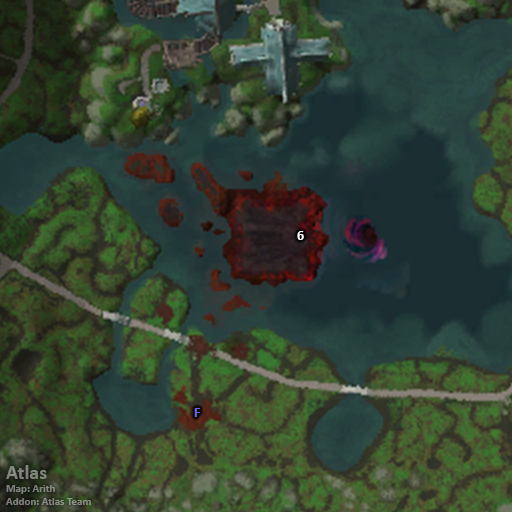
<style>
.page{position:relative;width:512px;height:512px}
.page>*{position:absolute;margin:0}
.t1{font:14px "Calibri-Bold";color:#ffffff}
.t2{font:14px "Calibri-Bold";color:#6666ff}
.t3{font:11px "Calibri-Bold";color:#81847e}
.t4{font:20px "Calibri-Bold";color:#81847e}
</style>
<div class="page">
<p class="t1" style="left:297px;top:231px;width:7px;height:9px">6</p>
<p class="t2" style="left:194px;top:408px;width:6px;height:9px">F</p>
<p class="t3" style="left:6px;top:465px;width:85px;height:40px"><span class="t4">Atlas<br></span>Map: Arith<br>Addon: Atlas Team</p>
</div>
